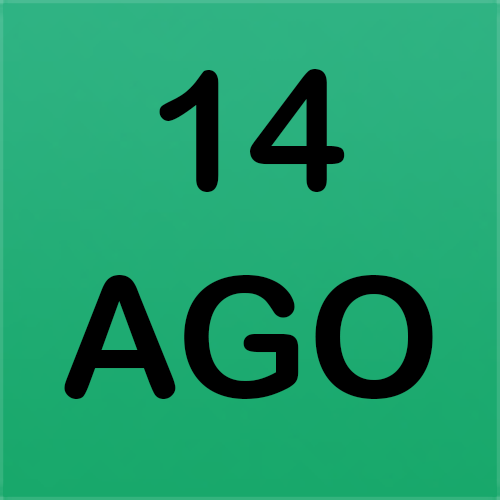
<style>
.page{position:relative;width:500px;height:500px}
.page>*{position:absolute;margin:0}
.t1{font:166.7px "ArialRoundedMTBold";color:#000000}
</style>
<div class="page">
<p class="t1" style="left:159px;top:69px;width:186px;height:123px">14</p>
<p class="t1" style="left:64px;top:275px;width:369px;height:124px">AGO</p>
</div>
